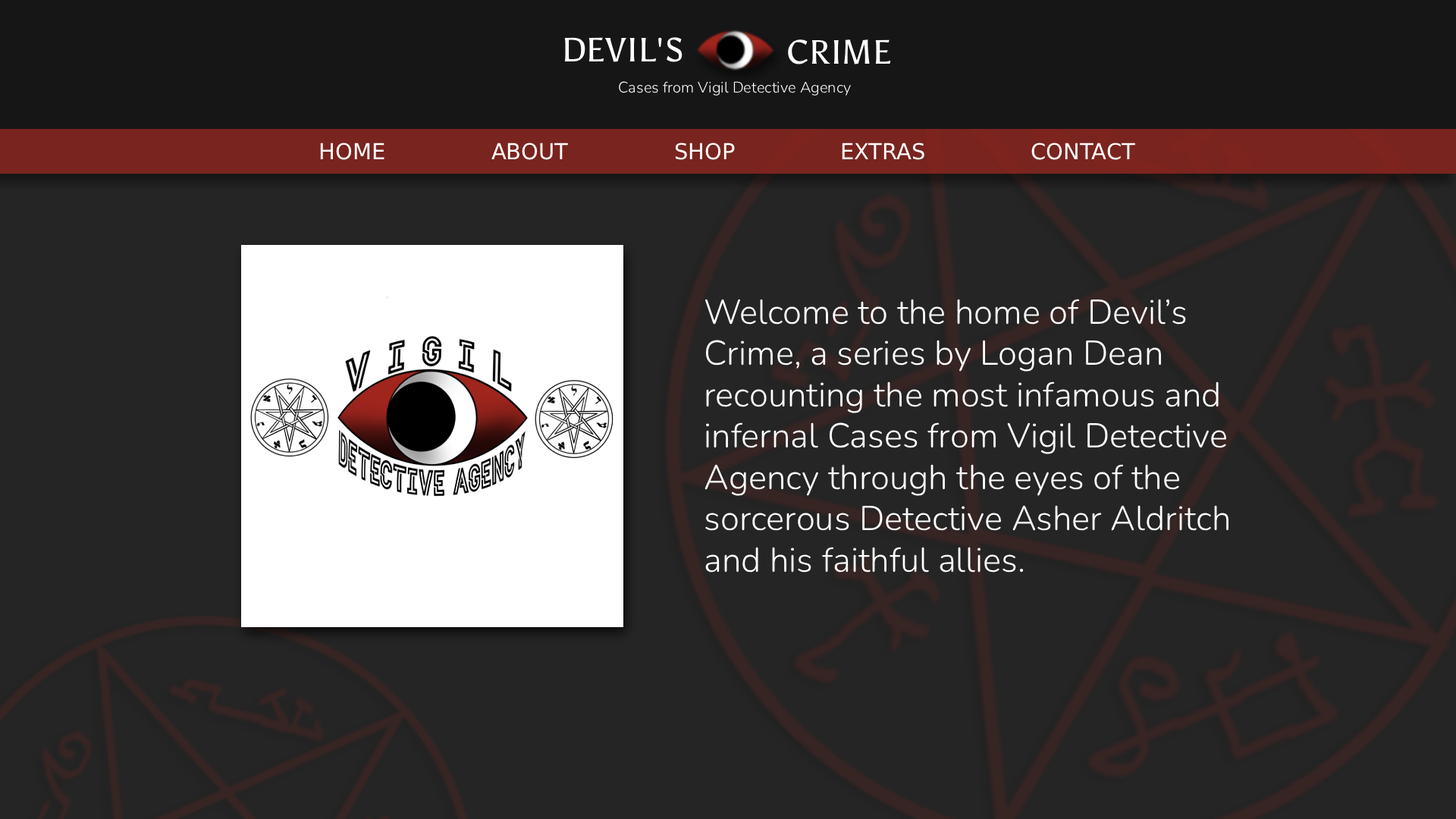
<style>
.page{position:relative;width:1456px;height:819px;background:#252525}
.page>*{position:absolute;margin:0}
.t1{font:33.7px "Asul-Regular";color:#ffffff}
.t2{font:15.3px "Nunito-Light";color:#ffffff}
.t3{font:22px "DejaVuSans";color:#ffffff}
.t4{font:34.5px "Nunito-Light";color:#ffffff}
</style>
<div class="page">
<p class="t1" style="left:564px;top:37px;width:118px;height:25px">DEVIL'S</p>
<p class="t1" style="left:788px;top:39px;width:103px;height:25px">CRIME</p>
<p class="t2" style="left:619px;top:81px;width:232px;height:15px">Cases from Vigil Detective Agency</p>
<p class="t3" style="left:320px;top:143px;width:64px;height:17px">HOME</p>
<p class="t3" style="left:491px;top:143px;width:77px;height:17px">ABOUT</p>
<p class="t3" style="left:675px;top:143px;width:60px;height:17px">SHOP</p>
<p class="t3" style="left:842px;top:143px;width:82px;height:17px">EXTRAS</p>
<p class="t3" style="left:1031px;top:143px;width:104px;height:17px">CONTACT</p>
<p class="t4" style="left:704px;top:299px;width:524px;height:274px">Welcome to the home of Devil’s Crime, a series by Logan Dean recounting the most infamous and infernal Cases from Vigil Detective Agency through the eyes of the sorcerous Detective Asher Aldritch and his faithful allies.</p>
</div>
